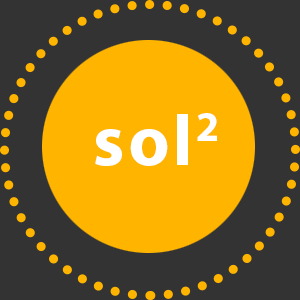
<style>
.page{position:relative;width:300px;height:300px;background:#333333}
.page>*{position:absolute;margin:0}
.t1{font:72px "MyriadPro-Bold";letter-spacing:0.05em;color:#ffffff}
</style>
<div class="page">
<p class="t1" style="left:95px;top:113px;width:122px;height:53px">sol2</p>
</div>
